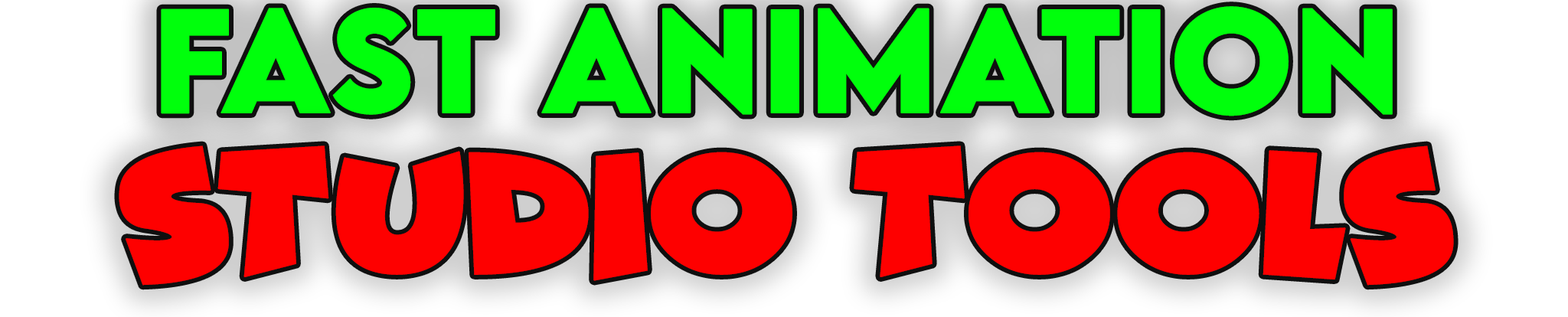
<style>
.page{position:relative;width:1568px;height:317px}
.page>*{position:absolute;margin:0}
.t1{font:130.8px "LEMONMILK-Bold";color:#00ff0c;text-transform:uppercase;font-weight:bold}
.t2{font:169.1px "ComicKings";color:#fe0000;text-transform:uppercase;font-weight:bold}
</style>
<div class="page">
<p class="t1" style="left:161px;top:6px;width:1232px;height:110px">FAST ANIMATION</p>
<p class="t2" style="left:119px;top:145px;width:1335px;height:141px">STUDIO TOOLS</p>
</div>
